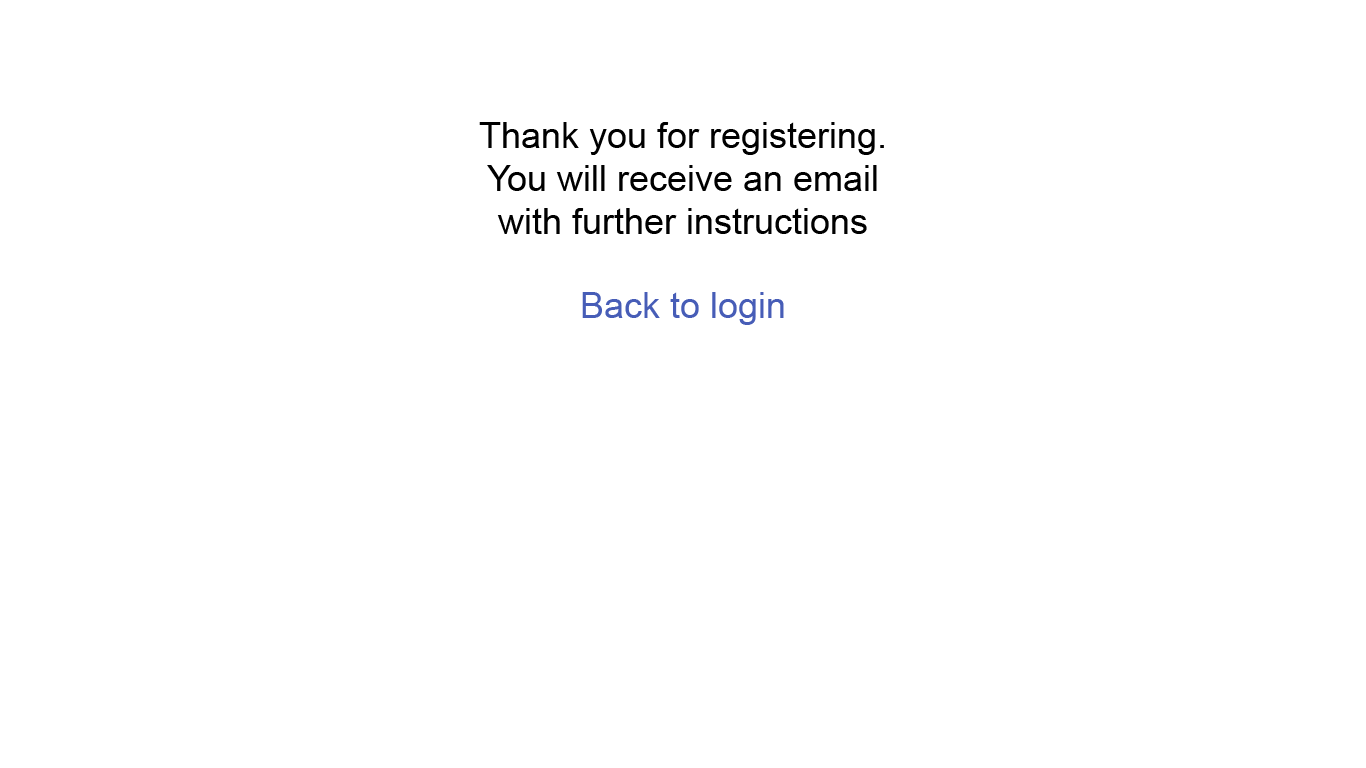
<style>
.page{position:relative;width:1366px;height:768px;background:#ffffff}
.page>*{position:absolute;margin:0}
.t1{font:36px "ArialMT";color:#000000}
.t2{font:36px "ArialMT";color:#475db7}
</style>
<div class="page">
<p class="t1" style="left:479px;top:122px;width:405px;height:112px;text-align:center">Thank you for registering.<br>You will receive an email with further instructions</p>
<p class="t2" style="left:582px;top:292px;width:202px;height:33px">Back to login</p>
</div>
